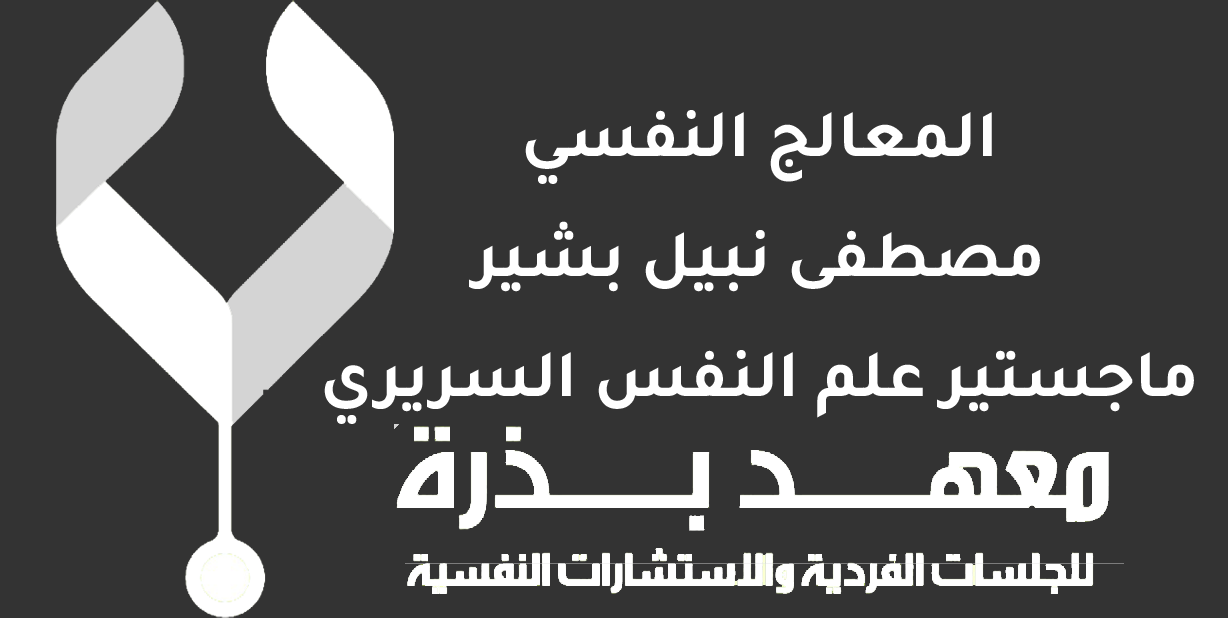
<style>
.page{position:relative;width:1228px;height:618px;background:#333333}
.page>*{position:absolute;margin:0}
.t1{font:68px/120px "Tajawal-Bold";color:#ffffff}
</style>
<div class="page">
<p class="t1" style="left:324px;top:110px;width:870px;height:314px;text-align:center">المعالج النفسي<br>مصطفى نبيل بشير<br>ماجستير علم النفس السريري</p>
</div>
